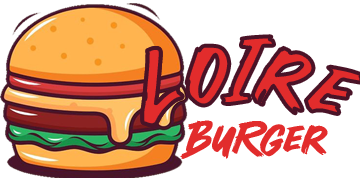
<style>
.page{position:relative;width:360px;height:178px;background:#ffffff}
.page>*{position:absolute;margin:0}
.t1{font:92.1px "There-Brat";color:#e22c2c}
.t2{font:45.4px "There-Brat";color:#e22c2c}
</style>
<div class="page">
<p class="t1" style="left:142px;top:36px;width:220px;height:90px;rotate:16deg">LoIre</p>
<p class="t1" style="left:142px;top:48px;width:41px;height:78px;rotate:16deg">L</p>
<p class="t2" style="left:180px;top:120px;width:148px;height:39px">BuRger</p>
</div>
